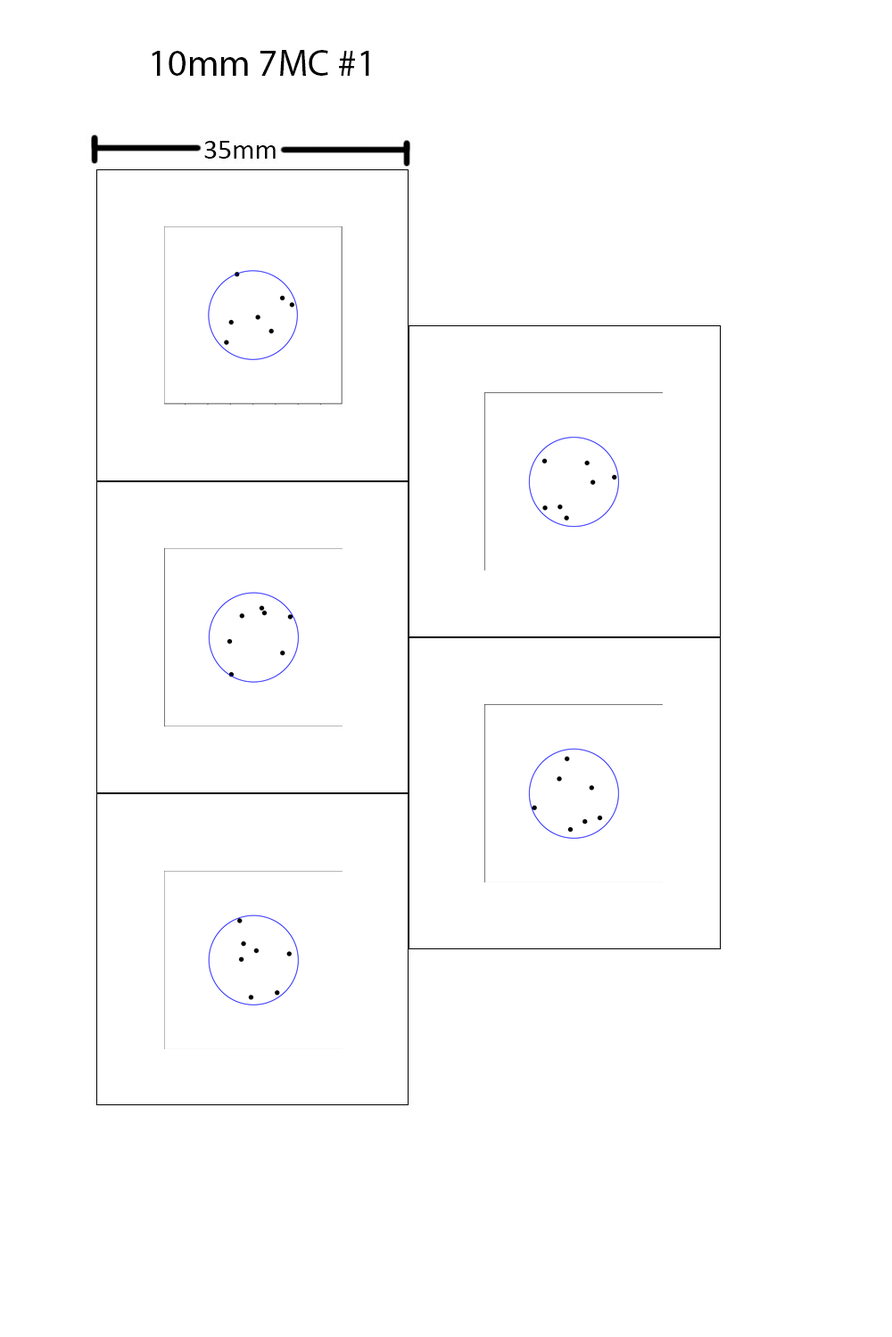
<style>
.page{position:relative;width:892px;height:1337px;background:#ffffff}
.page>*{position:absolute;margin:0}
.t1{font:37.7px "MyriadPro-Regular";color:#000000}
</style>
<div class="page">
<p class="t1" style="left:152px;top:50px;width:217px;height:26px">10mm 7MC #1</p>
</div>
